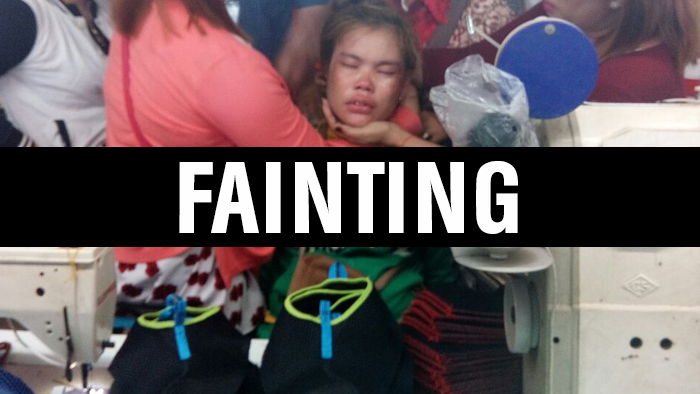
<style>
.page{position:relative;width:700px;height:394px}
.page>*{position:absolute;margin:0}
.t1{font:100px "AGBuchCondensedBQ-Medium";color:#fefefe}
</style>
<div class="page">
<p class="t1" style="left:179px;top:161px;width:339px;height:73px">FAINTING</p>
</div>
